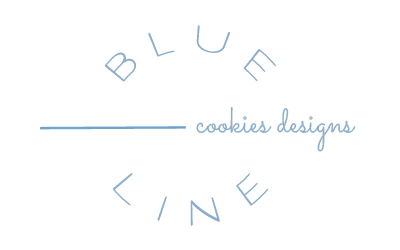
<style>
.page{position:relative;width:400px;height:250px;background:#ffffff}
.page>*{position:absolute;margin:0}
.t1{font:36.6px "QuicksandBook-Regular";color:#8caeca}
.t2{font:36.6px "Sacramento-Regular";color:#8caeca}
</style>
<div class="page">
<p class="t1" style="left:105px;top:25px;width:171px;height:57px">B L U E</p>
<p class="t2" style="left:196px;top:106px;width:160px;height:46px">cookies designs</p>
<p class="t1" style="left:112px;top:173px;width:157px;height:53px">L I N E</p>
</div>
